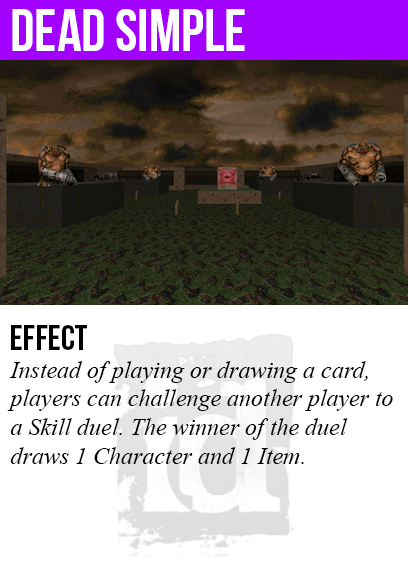
<style>
.page{position:relative;width:408px;height:585px;background:#ffffff}
.page>*{position:absolute;margin:0}
.t1{font:60px "BebasNeue";color:#ffffff}
.t2{font:36px "BebasNeue";color:#000000}
.t3{font:24px "TimesNewRomanPS-ItalicMT";color:#000000}
</style>
<div class="page">
<p class="t1" style="left:12px;top:9px;width:233px;height:42px">Dead simple</p>
<p class="t2" style="left:11px;top:325px;width:76px;height:25px">Effect</p>
<p class="t3" style="left:7px;top:361px;width:386px;height:103px">Instead of playing or drawing a card,<br>players can challenge another player to<br>a Skill duel. The winner of the duel<br>draws 1 Character and 1 Item.</p>
</div>
